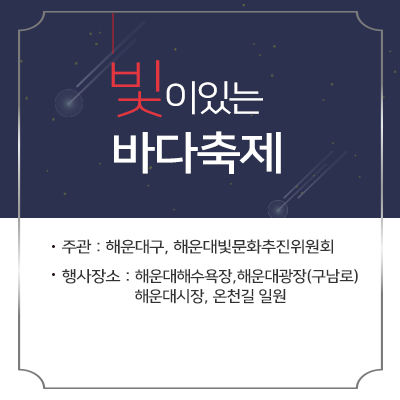
<style>
.page{position:relative;width:400px;height:400px;background:#2c3150}
.page>*{position:absolute;margin:0}
.t1{font:63px "NanumSquare_acL";letter-spacing:-0.05em;color:#e4363e;scale:1.11 1}
.t2{font:36px "NanumSquare_acR";letter-spacing:-0.05em;color:#ffffff;scale:1.11 1}
.t3{font:45px "NanumSquare_acB";color:#ffffff;scale:1.11 1}
.t4{font:15.3px "NanumSquare_acB";color:#333333;scale:1.11 1}
.t5{font:15.3px/20px "NanumSquare_acB";color:#333333;scale:1.06 1}
.t6{font:15.3px/20px "NanumSquare_acB";color:#333333;scale:1.11 1}
</style>
<div class="page">
<p class="t1" style="left:111px;top:60px;width:51px;height:58px">빛</p>
<p class="t2" style="left:166px;top:81px;width:97px;height:34px">이있는</p>
<p class="t3" style="left:114px;top:131px;width:167px;height:43px">바다축제</p>
<p class="t4" style="left:62px;top:239px;width:271px;height:16px">주관 : 해운대구, 해운대빛문화추진위원회</p>
<p class="t5" style="left:62px;top:269px;width:296px;height:35px"><span class="t6">행사장소 : </span>해운대해수욕장,해운대광장(구남로)<br>                  해운대시장, 온천길 일원</p>
</div>
